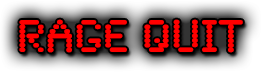
<style>
.page{position:relative;width:261px;height:72px}
.page>*{position:absolute;margin:0}
.t1{font:48px "SynchroLET";color:#ff0000}
</style>
<div class="page">
<p class="t1" style="left:19px;top:19px;width:224px;height:34px">RAGE QUIT</p>
</div>
